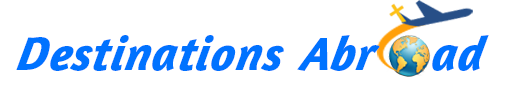
<style>
.page{position:relative;width:511px;height:98px;background:#ffffff}
.page>*{position:absolute;margin:0}
.t1{font:48px "Amaranth-BoldItalic";letter-spacing:0.01em;color:#0072ff;font-style:italic}
</style>
<div class="page">
<p class="t1" style="left:16px;top:35px;width:268px;height:36px">Destinations</p>
<p class="t1" style="left:297px;top:35px;width:192px;height:36px">Abr     ad</p>
</div>
